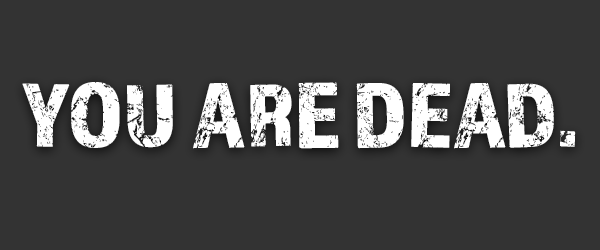
<style>
.page{position:relative;width:600px;height:250px;background:#333333}
.page>*{position:absolute;margin:0}
.t1{font:95.1px "Almaq-Rough";color:#ffffff}
</style>
<div class="page">
<p class="t1" style="left:22px;top:82px;width:554px;height:67px">YOU ARE DEAD.</p>
</div>
